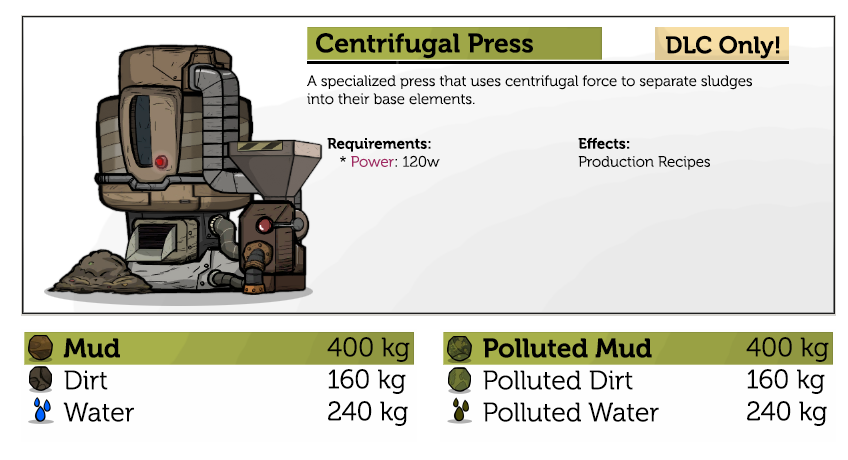
<style>
.page{position:relative;width:848px;height:460px;background:#ffffff}
.page>*{position:absolute;margin:0}
.t1{font:26.7px "Museo-700";color:#000000}
.t2{font:24px "Museo-700";color:#000000}
.t3{font:15px "Museo-300";color:#000000}
.t4{font:15px "Museo-700";color:#000000}
.t5{font:15px "Museo-300";color:#a12864}
</style>
<div class="page">
<p class="t1" style="left:316px;top:33px;width:217px;height:26px">Centrifugal Press</p>
<p class="t2" style="left:666px;top:35px;width:114px;height:24px">DLC Only!</p>
<p class="t3" style="left:307px;top:75px;width:445px;height:30px">A specialized press that uses centrifugal force to separate sludges into their base elements.</p>
<p class="t3" style="left:578px;top:137px;width:132px;height:33px"><span class="t4">Effects:</span><br>Production Recipes</p>
<p class="t4" style="left:327px;top:138px;width:113px;height:29px">Requirements:<br><span class="t3">   * </span><span class="t5">Power</span><span class="t3">: 120w</span></p>
</div>
